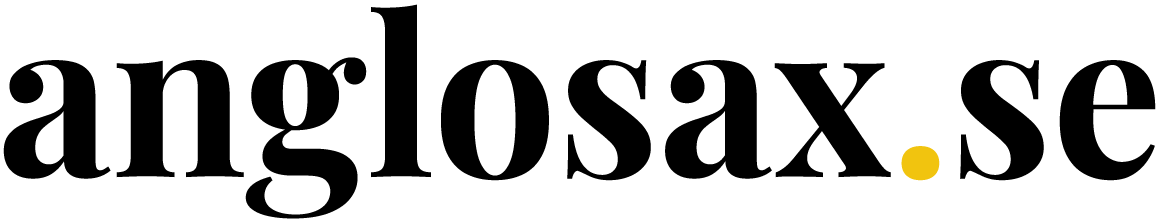
<style>
.page{position:relative;width:1159px;height:223px;background:#ffffff}
.page>*{position:absolute;margin:0}
.t1{font:220px "PlayfairDisplayRoman-Bold";color:#000000}
.t2{font:220px "PlayfairDisplayRoman-Bold";color:#f1c40f}
</style>
<div class="page">
<p class="t1" style="left:3px;top:4px;width:1153px;height:215px">anglosax<span class="t2">.</span>se</p>
</div>
